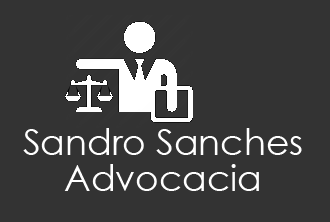
<style>
.page{position:relative;width:330px;height:222px;background:#333333}
.page>*{position:absolute;margin:0}
.t1{font:36px "CenturyGothic";color:#ffffff}
</style>
<div class="page">
<p class="t1" style="left:23px;top:128px;width:279px;height:27px">Sandro Sanches</p>
<p class="t1" style="left:64px;top:164px;width:195px;height:27px">Advocacia</p>
</div>
